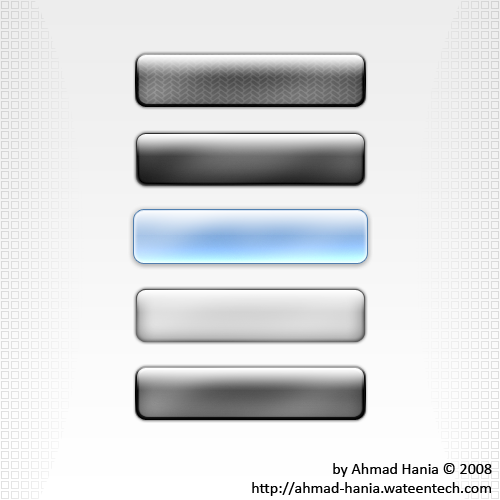
<style>
.page{position:relative;width:500px;height:500px}
.page>*{position:absolute;margin:0}
.t1{font:16px "Calibri";color:#000000}
</style>
<div class="page">
<p class="t1" style="left:252px;top:463px;width:240px;height:33px;text-align:right">by Ahmad Hania © 2008<br>http://ahmad-hania.wateentech.com</p>
</div>
